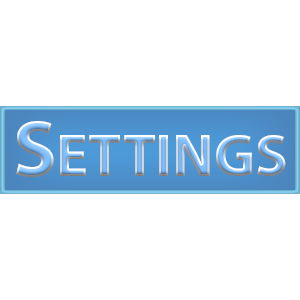
<style>
.page{position:relative;width:300px;height:300px;background:#ffffff}
.page>*{position:absolute;margin:0}
.t1{font:60px "MyriadPro-Bold"}
.t2{font:80px "MyriadPro-Bold"}
</style>
<div class="page">
<p class="t1" style="left:16px;top:121px;width:270px;height:56px"><span class="t2">S</span>ETTINGS</p>
</div>
